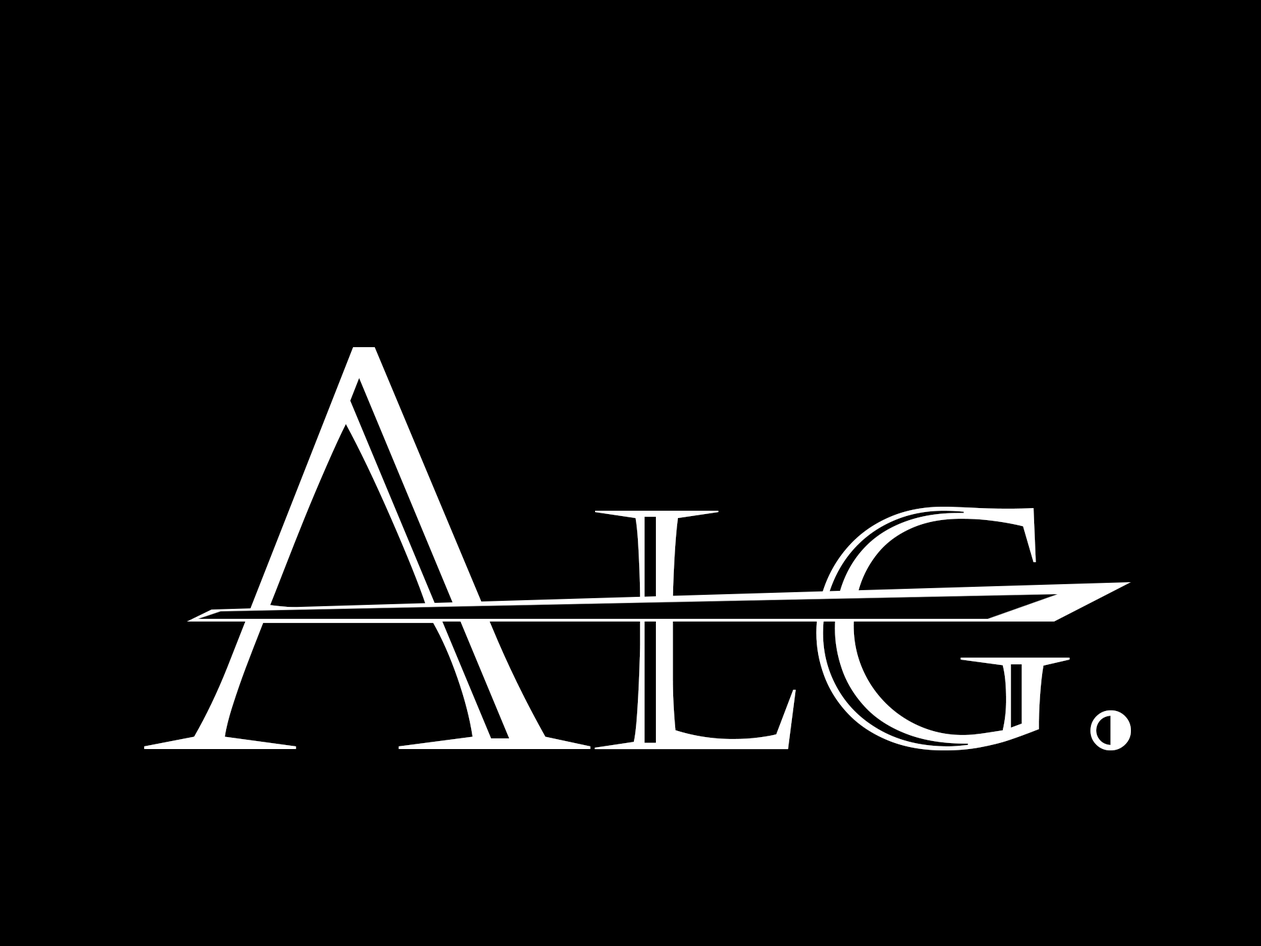
<style>
.page{position:relative;width:1261px;height:946px;background:#000000}
.page>*{position:absolute;margin:0}
.t1{font:333.6px "Castellar";color:#ffffff}
.t2{font:556.1px "Castellar";color:#ffffff}
</style>
<div class="page">
<p class="t1" style="left:144px;top:347px;width:987px;height:403px"><span class="t2">A</span>lg.</p>
</div>
